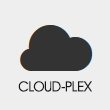
<style>
.page{position:relative;width:110px;height:110px;background:#eeeeee}
.page>*{position:absolute;margin:0}
.t1{font:14px "AvantGardeITCbyBT-Book";letter-spacing:-0.025em;color:#1a171b}
</style>
<div class="page">
<p class="t1" style="left:18px;top:81px;width:74px;height:11px">CLOUD-PLEX</p>
</div>
